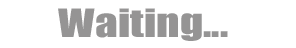
<style>
.page{position:relative;width:296px;height:48px;background:#ffffff}
.page>*{position:absolute;margin:0}
.t1{font:36px "Impact";color:#959494;scale:1.25 1}
</style>
<div class="page">
<p class="t1" style="left:58px;top:8px;width:170px;height:33px">Waiting...</p>
</div>
